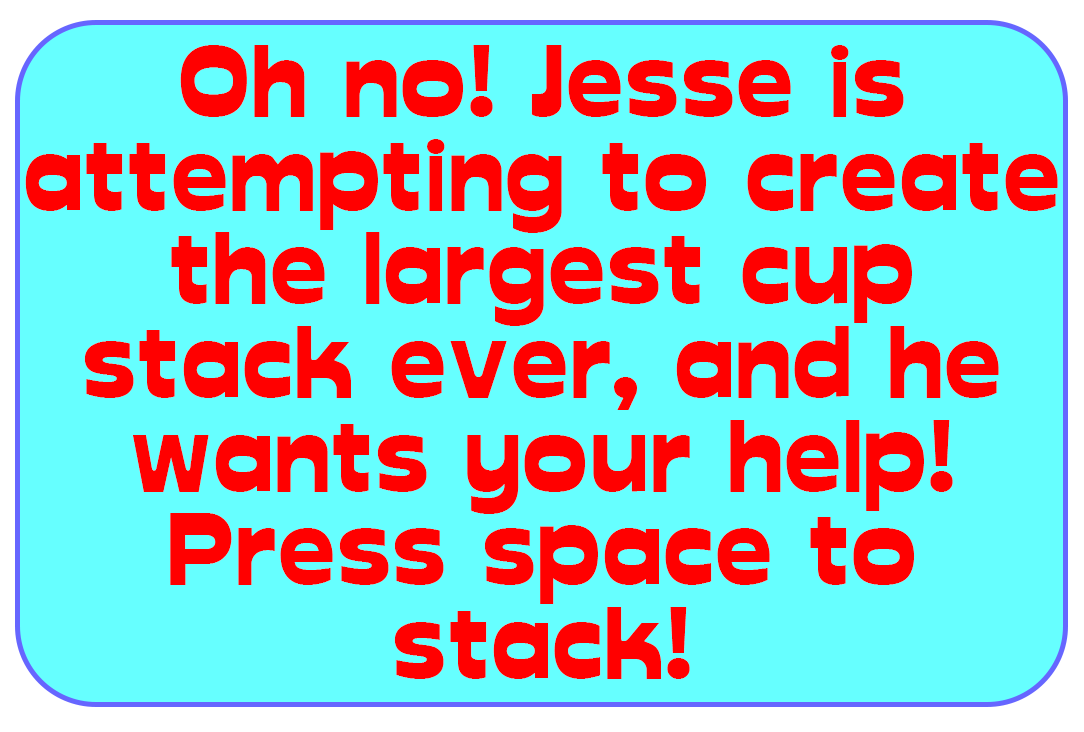
<style>
.page{position:relative;width:1084px;height:732px;background:#66ffff}
.page>*{position:absolute;margin:0}
.t1{font:98.9px/93.7px "Glockenspiel";color:#ff0000}
</style>
<div class="page">
<p class="t1" style="left:25px;top:45px;width:1033px;height:634px;text-align:center">Oh no! Jesse is attempting to create the largest cup stack ever, and he wants your help! Press space to stack!</p>
</div>
